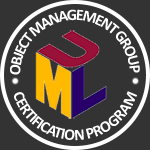
<style>
.page{position:relative;width:150px;height:150px;background:#333333}
.page>*{position:absolute;margin:0}
.t1{font:16px/24px "Calibri-Bold";letter-spacing:-0.1em;color:#ffffff}
</style>
<div class="page">
<p class="t1" style="left:10px;top:9px;width:130px;height:66px">OBJECT MANAGEMENT GROUP</p>
<p class="t1" style="left:14px;top:91px;width:123px;height:50px">CERTIFICATION PROGRAM</p>
</div>
